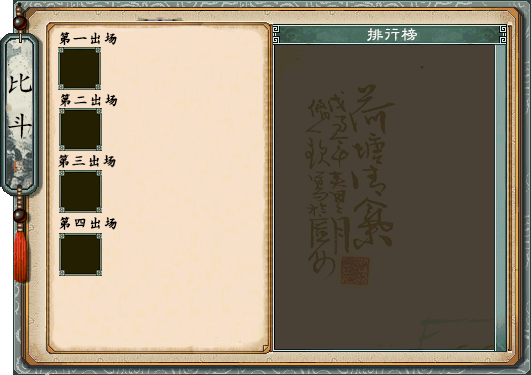
<style>
.page{position:relative;width:531px;height:375px;background:#494036}
.page>*{position:absolute;margin:0}
.t1{font:14px "HYc1gs-GBpc-EUC-H";letter-spacing:0.075em;color:#000000;font-weight:bold}
.t2{font:28px "HYc1gs-GBpc-EUC-H";letter-spacing:0.075em;color:#000000}
</style>
<div class="page">
<p class="t1" style="left:59px;top:32px;width:58px;height:14px">第一出场</p>
<p class="t2" style="left:8px;top:73px;width:25px;height:21px">比</p>
<p class="t1" style="left:60px;top:93px;width:58px;height:14px">第二出场</p>
<p class="t2" style="left:7px;top:113px;width:25px;height:26px">斗</p>
<p class="t1" style="left:58px;top:154px;width:58px;height:14px">第三出场</p>
<p class="t1" style="left:59px;top:216px;width:58px;height:14px">第四出场</p>
</div>
